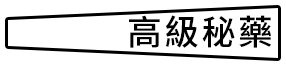
<style>
.page{position:relative;width:286px;height:66px;background:#ffffff}
.page>*{position:absolute;margin:0}
.t1{font:35px "NotoSansCJKtc-Medium";letter-spacing:0.06em;color:#000000}
</style>
<div class="page">
<p class="t1" style="left:129px;top:15px;width:142px;height:33px">高級秘藥</p>
</div>
